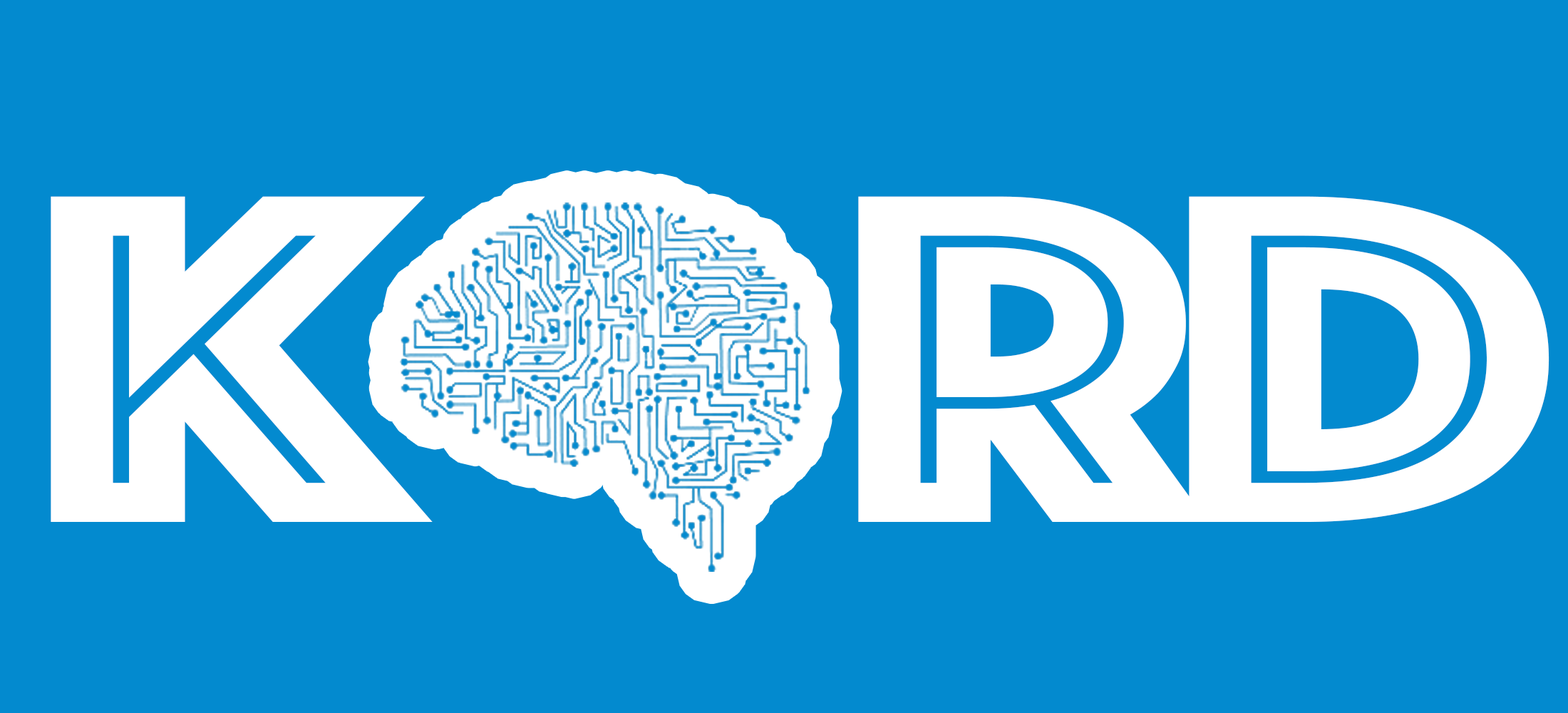
<style>
.page{position:relative;width:1568px;height:713px;background:#038acf}
.page>*{position:absolute;margin:0}
.t1{font:487.5px "Phosphate-Inline";letter-spacing:-0.05em;color:#ffffff;scale:1.27 1}
</style>
<div class="page">
<p class="t1" style="left:51px;top:196px;width:1498px;height:326px">k     rd</p>
</div>
